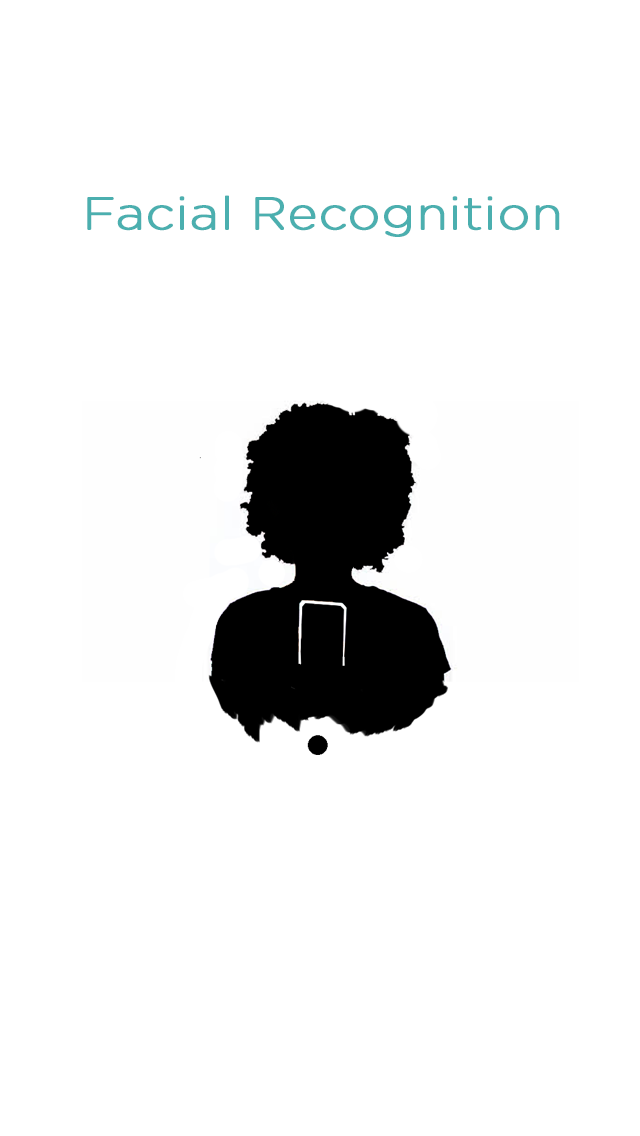
<style>
.page{position:relative;width:640px;height:1136px;background:#ffffff}
.page>*{position:absolute;margin:0}
.t1{font:45.8px "GothamRounded-Light";color:#4bafaf;font-weight:bold;scale:1.1 1}
</style>
<div class="page">
<p class="t1" style="left:87px;top:195px;width:473px;height:42px">Facial Recognition</p>
</div>
